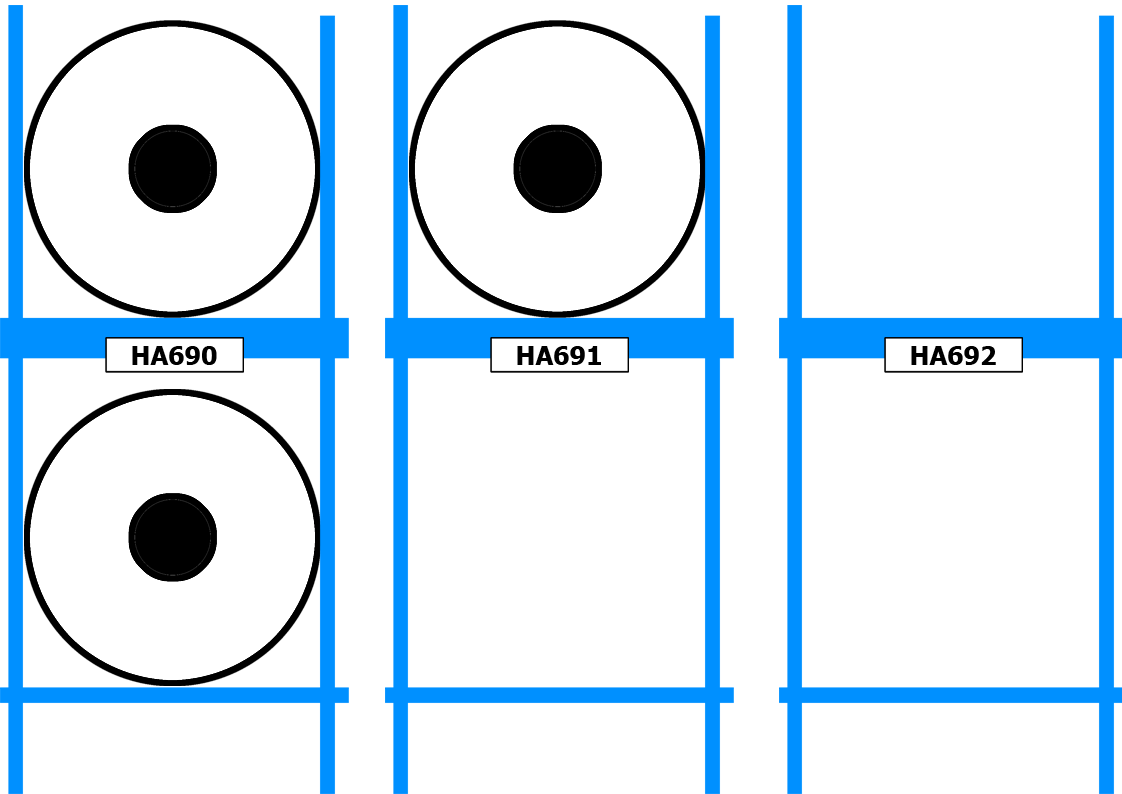
<style>
.page{position:relative;width:1122px;height:794px;background:#ffffff}
.page>*{position:absolute;margin:0}
.t1{font:25.8px "Tahoma-Bold";color:#000000}
</style>
<div class="page">
<p class="t1" style="left:132px;top:346px;width:85px;height:19px">HA690</p>
<p class="t1" style="left:517px;top:346px;width:84px;height:19px">HA691</p>
<p class="t1" style="left:911px;top:346px;width:85px;height:19px">HA692</p>
</div>
